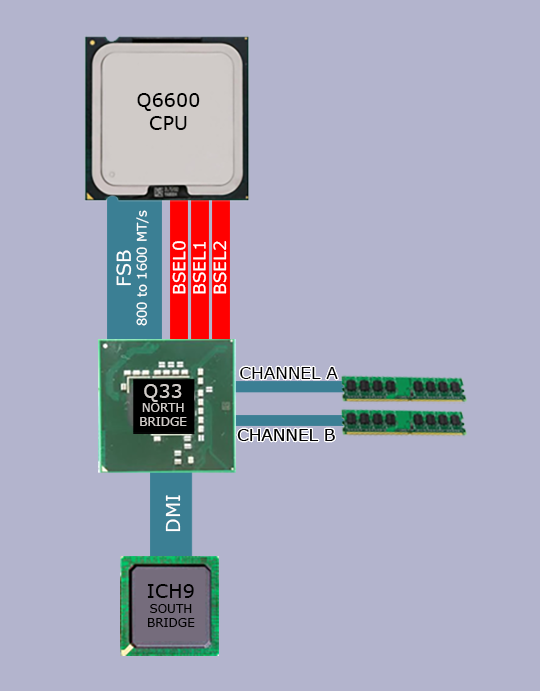
<style>
.page{position:relative;width:540px;height:691px;background:#b3b4cd}
.page>*{position:absolute;margin:0}
.t1{font:19.2px "Verdana";color:#000000}
.t2{font:13px "Verdana";color:#ffffff}
.t3{font:19.2px "Verdana";color:#ffffff}
.t4{font:17px "Verdana";color:#ffffff}
.t5{font:16.8px "Verdana";color:#000000}
.t6{font:12px "Verdana";color:#d0cbc8}
.t7{font:19.2px "Verdana";color:#d0cbc8}
.t8{font:12px "Verdana";color:#000000}
</style>
<div class="page">
<p class="t1" style="left:137px;top:93px;width:63px;height:37px;text-align:center">Q6600<br>CPU</p>
<p class="t2" style="left:116px;top:210px;width:33px;height:116px;text-align:center;rotate:-90deg"><span class="t3">FSB<br></span>800 to 1600 MT/s</p>
<p class="t4" style="left:172px;top:241px;width:55px;height:53px;text-align:center;rotate:-90deg">BSEL0<br>BSEL1<br>BSEL2</p>
<p class="t5" style="left:240px;top:367px;width:98px;height:12px">CHANNEL A</p>
<p class="t6" style="left:140px;top:384px;width:47px;height:42px;text-align:center"><span class="t7">Q33<br></span>NORTH<br>BRIDGE</p>
<p class="t3" style="left:165px;top:495px;width:16px;height:37px;rotate:-90deg">DMI</p>
<p class="t8" style="left:147px;top:584px;width:48px;height:43px;text-align:center"><span class="t1">ICH9<br></span>SOUTH<br>BRIDGE</p>
</div>
